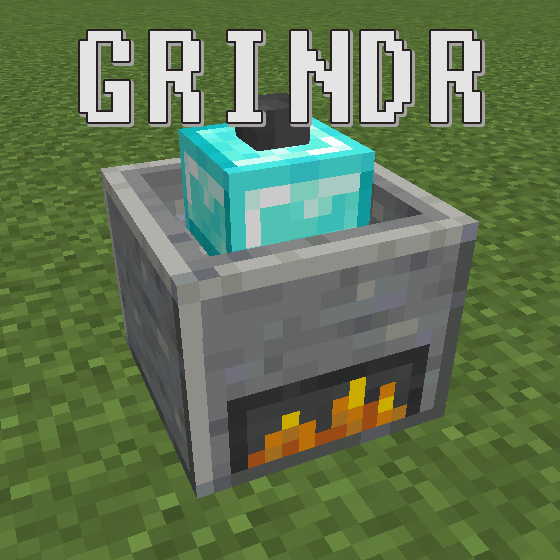
<style>
.page{position:relative;width:560px;height:560px}
.page>*{position:absolute;margin:0}
.t1{font:130px "Fixedsys";letter-spacing:0.05em;color:#e4e4e4;scale:0.8 1}
</style>
<div class="page">
<p class="t1" style="left:80px;top:31px;width:400px;height:91px">GRINDR</p>
</div>
